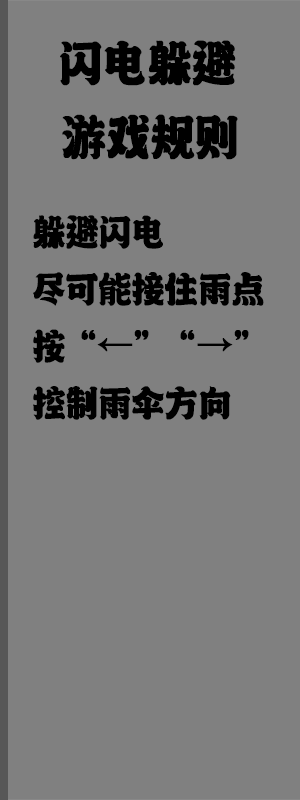
<style>
.page{position:relative;width:300px;height:800px;background:#808080}
.page>*{position:absolute;margin:0}
.t1{font:57.1px "-";letter-spacing:-0.02em;color:#000000;font-weight:bold;scale:0.88 1}
.t2{font:42.9px/57.1px "-";letter-spacing:-0.02em;color:#000000;font-weight:bold;scale:0.88 1}
</style>
<div class="page">
<p class="t1" style="left:60px;top:40px;width:176px;height:46px">闪电躲避</p>
<p class="t1" style="left:62px;top:114px;width:176px;height:46px">游戏规则</p>
<p class="t2" style="left:33px;top:215px;width:231px;height:205px">躲避闪电<br>尽可能接住雨点<br>按“←”“→”<br>控制雨伞方向</p>
</div>
